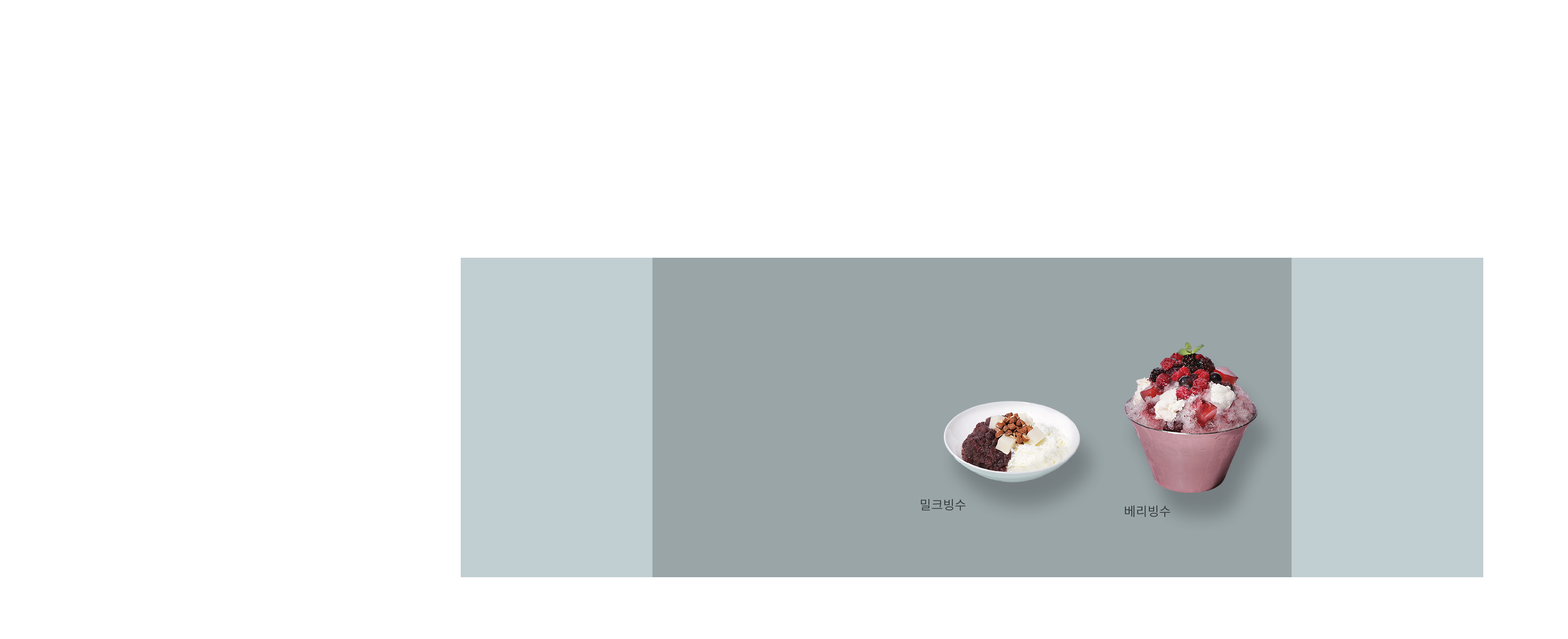
<style>
.page{position:relative;width:1568px;height:639px;background:#ffffff}
.page>*{position:absolute;margin:0}
.t1{font:12.8px "NotoSansKR-Regular";color:#353a3b}
</style>
<div class="page">
<p class="t1" style="left:921px;top:499px;width:45px;height:12px">밀크빙수</p>
<p class="t1" style="left:1125px;top:505px;width:45px;height:12px">베리빙수</p>
</div>
